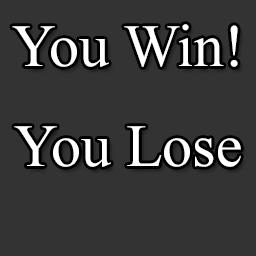
<style>
.page{position:relative;width:256px;height:256px;background:#333333}
.page>*{position:absolute;margin:0}
.t1{font:60px "TimesNewRomanPSMT";color:#ffffff}
</style>
<div class="page">
<p class="t1" style="left:12px;top:24px;width:226px;height:43px">You Win!</p>
<p class="t1" style="left:14px;top:126px;width:227px;height:41px">You Lose</p>
</div>
